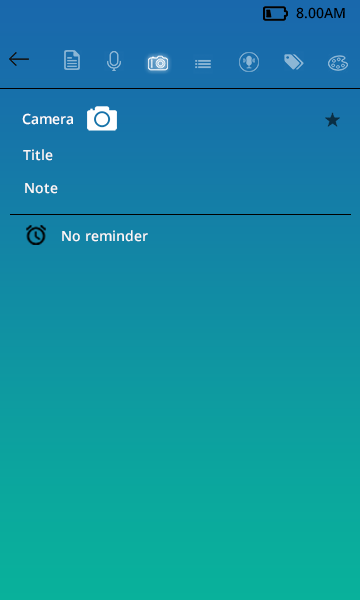
<style>
.page{position:relative;width:360px;height:600px}
.page>*{position:absolute;margin:0}
.t1{font:14px "OpenSans-Semibold";color:#000000}
.t2{font:14px "OpenSans-Semibold";color:#ffffff}
.t3{font:14px "OpenSans-Semibold";color:#fbf8f8}
</style>
<div class="page">
<p class="t1" style="left:296px;top:7px;width:49px;height:12px">8.00AM</p>
<p class="t2" style="left:22px;top:113px;width:51px;height:12px">Camera</p>
<p class="t3" style="left:23px;top:149px;width:30px;height:12px">Title</p>
<p class="t3" style="left:25px;top:183px;width:33px;height:11px">Note</p>
<p class="t3" style="left:62px;top:230px;width:86px;height:12px">No reminder</p>
</div>
